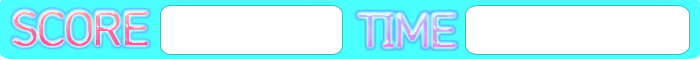
<style>
.page{position:relative;width:700px;height:60px;background:#ffffff}
.page>*{position:absolute;margin:0}
.t1{font:45.7px "HCRDotum";letter-spacing:-0.07em;font-weight:bold}
</style>
<div class="page">
<p class="t1" style="left:12px;top:10px;width:136px;height:36px">SCORE</p>
<p class="t1" style="left:358px;top:13px;width:98px;height:35px">TIME</p>
</div>
